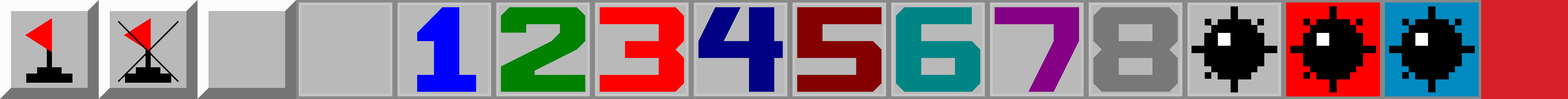
<style>
.page{position:relative;width:1568px;height:99px;background:#b9b9b9}
.page>*{position:absolute;margin:0}
.t1{font:84.3px "MINE-SWEEPER";letter-spacing:-0.075em;color:#0000ff}
.t2{font:84.3px "MINE-SWEEPER";letter-spacing:-0.075em;color:#008200}
.t3{font:84.3px "MINE-SWEEPER";letter-spacing:-0.075em;color:#ff0000}
.t4{font:84.3px "MINE-SWEEPER";letter-spacing:-0.075em;color:#000084}
.t5{font:84.3px "MINE-SWEEPER";letter-spacing:-0.075em;color:#840000}
.t6{font:84.3px "MINE-SWEEPER";letter-spacing:-0.075em;color:#008585}
.t7{font:84.3px "MINE-SWEEPER";letter-spacing:-0.075em;color:#850085}
.t8{font:84.3px "MINE-SWEEPER";letter-spacing:-0.075em;color:#787878}
</style>
<div class="page">
<p class="t1" style="left:417px;top:7px;width:59px;height:85px">1</p>
<p class="t2" style="left:501px;top:7px;width:84px;height:85px">2</p>
<p class="t3" style="left:600px;top:7px;width:84px;height:85px">3</p>
<p class="t4" style="left:698px;top:7px;width:85px;height:85px">4</p>
<p class="t5" style="left:797px;top:7px;width:84px;height:85px">5</p>
<p class="t6" style="left:896px;top:7px;width:84px;height:85px">6</p>
<p class="t7" style="left:995px;top:7px;width:84px;height:85px">7</p>
<p class="t8" style="left:1093px;top:7px;width:85px;height:85px">8</p>
</div>
